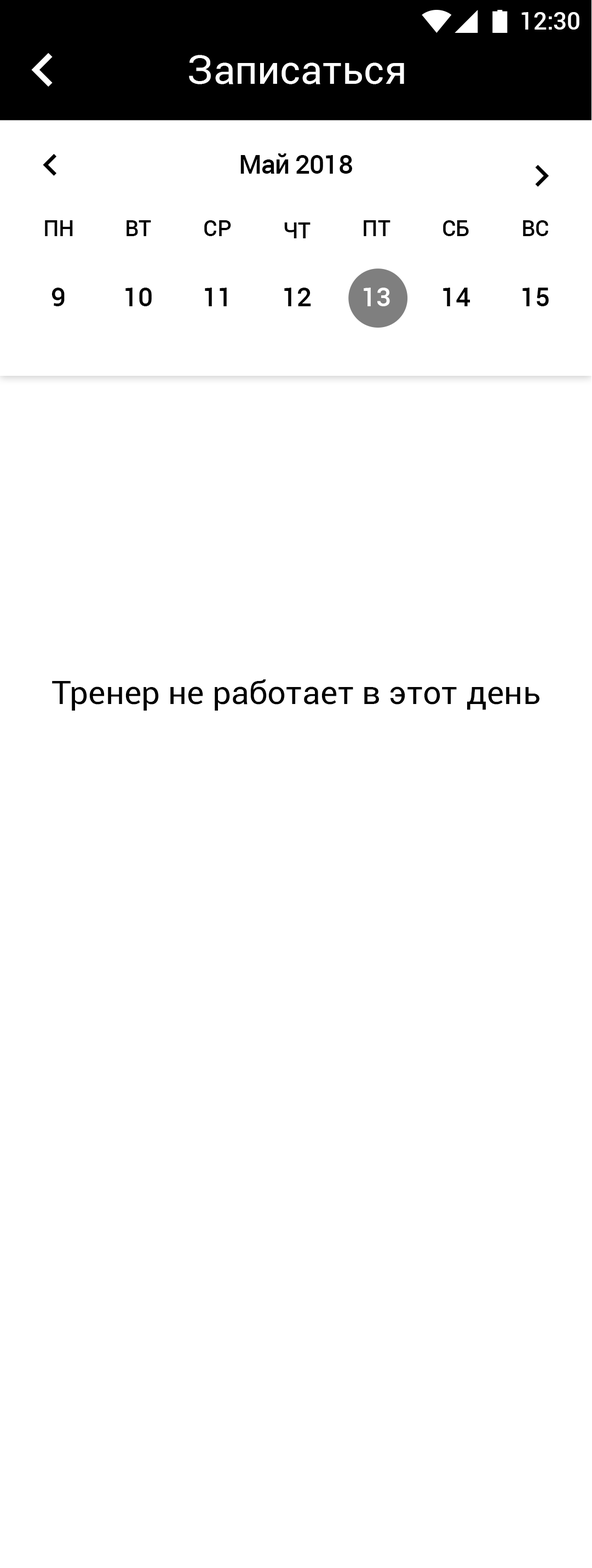
<style>
.page{position:relative;width:592px;height:1568px;background:#ffffff}
.page>*{position:absolute;margin:0}
.t1{font:24.1px "Roboto-Medium";color:#ffffff}
.t2{font:39.4px "Roboto-Regular";color:#ffffff}
.t3{font:26.3px "Roboto-Medium";letter-spacing:-0.023em;color:#000000}
.t4{font:21.8px "Roboto-Medium";color:#000000}
.t5{font:26.3px "Roboto-Medium";color:#000000}
.t6{font:26.3px "Roboto-Medium";color:#ffffff}
.t7{font:32.9px "Roboto-Regular";color:#000000}
</style>
<div class="page">
<p class="t1" style="left:522px;top:12px;width:58px;height:18px">12:30</p>
<p class="t2" style="left:189px;top:55px;width:215px;height:29px">Записаться</p>
<p class="t3" style="left:241px;top:153px;width:111px;height:21px">Май 2018</p>
<p class="t4" style="left:45px;top:220px;width:28px;height:16px">ПН</p>
<p class="t4" style="left:127px;top:220px;width:24px;height:16px">ВТ</p>
<p class="t4" style="left:204px;top:220px;width:27px;height:16px">СР</p>
<p class="t4" style="left:364px;top:220px;width:27px;height:16px">ПТ</p>
<p class="t4" style="left:443px;top:220px;width:26px;height:16px">СБ</p>
<p class="t4" style="left:523px;top:220px;width:25px;height:16px">ВС</p>
<p class="t4" style="left:284px;top:222px;width:27px;height:16px">ЧТ</p>
<p class="t5" style="left:51px;top:288px;width:14px;height:18px">9</p>
<p class="t5" style="left:125px;top:288px;width:27px;height:18px">10</p>
<p class="t5" style="left:205px;top:288px;width:22px;height:18px">11</p>
<p class="t5" style="left:284px;top:288px;width:27px;height:18px">12</p>
<p class="t6" style="left:364px;top:288px;width:26px;height:18px">13</p>
<p class="t5" style="left:443px;top:288px;width:28px;height:18px">14</p>
<p class="t5" style="left:523px;top:288px;width:26px;height:18px">15</p>
<p class="t7" style="left:52px;top:679px;width:488px;height:32px">Тренер не работает в этот день</p>
</div>
